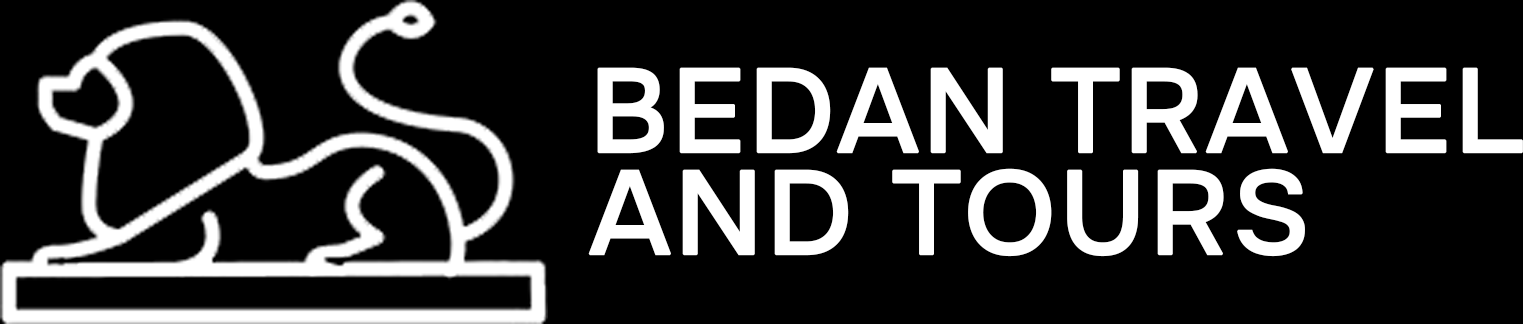
<style>
.page{position:relative;width:1523px;height:324px;background:#000000}
.page>*{position:absolute;margin:0}
.t1{font:117.6px/101.9px "Onest-Medium";color:#ffffff;font-weight:bold}
</style>
<div class="page">
<p class="t1" style="left:588px;top:67px;width:935px;height:190px">BEDAN TRAVEL<br>AND TOURS</p>
</div>
